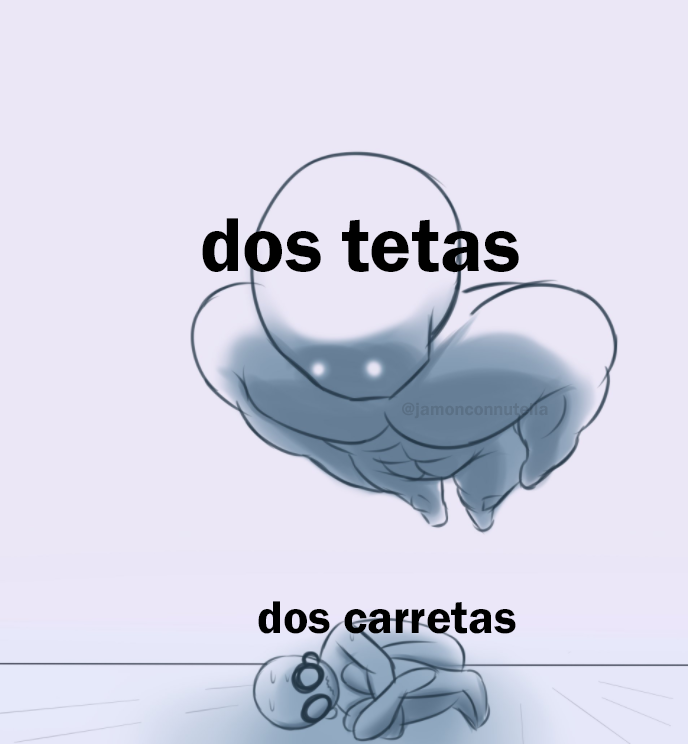
<style>
.page{position:relative;width:688px;height:744px;background:#ebe7f6}
.page>*{position:absolute;margin:0}
.t1{font:79.2px "FranklinGothic-Demi";color:#000000}
.t2{font:18.1px "FranklinGothic-Demi";color:#5a7085}
.t3{font:47.4px "FranklinGothic-Demi";color:#000000}
</style>
<div class="page">
<p class="t1" style="left:202px;top:218px;width:317px;height:54px">dos tetas</p>
<p class="t2" style="left:402px;top:402px;width:146px;height:17px">@jamonconnutella</p>
<p class="t3" style="left:258px;top:601px;width:258px;height:33px">dos carretas</p>
</div>
